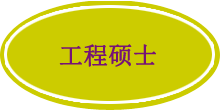
<style>
.page{position:relative;width:220px;height:110px;background:#cccc00}
.page>*{position:absolute;margin:0}
.t1{font:24px "SimSun";color:#761376;font-weight:bold}
</style>
<div class="page">
<p class="t1" style="left:59px;top:44px;width:97px;height:23px">工程硕士</p>
</div>
